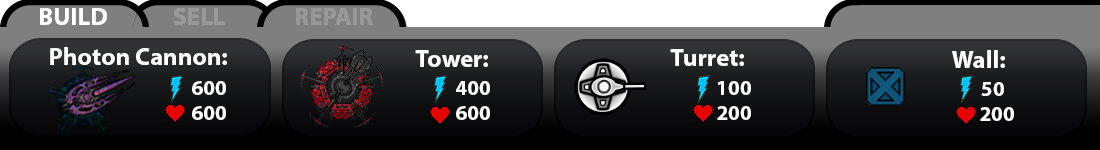
<style>
.page{position:relative;width:1100px;height:150px}
.page>*{position:absolute;margin:0}
.t1{font:12px "MyriadPro-Bold";color:#fffefe}
.t2{font:20.8px "MyriadPro-Bold";color:#fffefe}
</style>
<div class="page">
<p class="t1" style="left:50px;top:47px;width:177px;height:18px">Photon Cannon:</p>
<p class="t1" style="left:415px;top:50px;width:73px;height:17px">Tower:</p>
<p class="t1" style="left:670px;top:49px;width:74px;height:17px">Turret:</p>
<p class="t1" style="left:952px;top:50px;width:53px;height:18px">Wall:</p>
<p class="t2" style="left:192px;top:81px;width:34px;height:39px;text-align:center">600<br> 600</p>
<p class="t2" style="left:456px;top:81px;width:34px;height:39px;text-align:center">400<br> 600</p>
<p class="t2" style="left:717px;top:81px;width:34px;height:39px;text-align:center">100 <br>200</p>
<p class="t2" style="left:980px;top:82px;width:34px;height:39px;text-align:center">50    <br>200</p>
</div>
